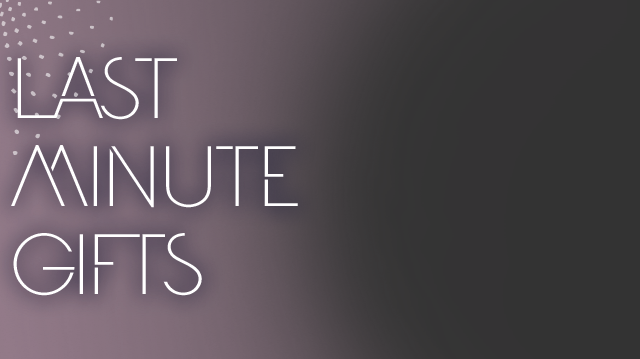
<style>
.page{position:relative;width:640px;height:359px}
.page>*{position:absolute;margin:0}
.t1{font:89.3px/88.2px "Amundsen";letter-spacing:-0.03em;color:#ffffff;text-transform:uppercase}
.t2{font:89.3px/88.2px "Amundsen";letter-spacing:-0.05em;color:#ffffff;text-transform:uppercase}
</style>
<div class="page">
<p class="t1" style="left:11px;top:57px;width:287px;height:239px"><span class="t2">last <br></span>minute<br><span class="t2">gifts</span></p>
</div>
